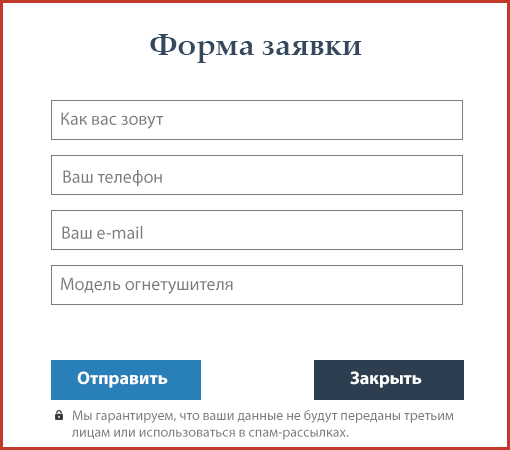
<style>
.page{position:relative;width:510px;height:450px;background:#ffffff}
.page>*{position:absolute;margin:0}
.t1{font:30px "PalatinoLinotype-Bold";color:#34495e}
.t2{font:18px "MyriadPro-Regular";color:#7c7c7c}
.t3{font:18px "MyriadPro-Bold";color:#ffffff}
.t4{font:14px "MyriadPro-Regular";color:#7c7c7c}
</style>
<div class="page">
<p class="t1" style="left:150px;top:34px;width:212px;height:29px">Форма заявки</p>
<p class="t2" style="left:61px;top:112px;width:103px;height:17px">Как вас зовут</p>
<p class="t2" style="left:63px;top:170px;width:99px;height:17px">Ваш телефон</p>
<p class="t2" style="left:62px;top:226px;width:81px;height:13px">Ваш e-mail</p>
<p class="t2" style="left:61px;top:277px;width:172px;height:17px">Модель огнетушителя</p>
<p class="t3" style="left:77px;top:371px;width:91px;height:17px">Отправить</p>
<p class="t3" style="left:350px;top:371px;width:72px;height:17px">Закрыть</p>
<p class="t4" style="left:72px;top:410px;width:382px;height:30px">Мы гарантируем, что ваши данные не будут переданы третьим <br>лицам или использоваться в спам-рассылках.</p>
</div>
